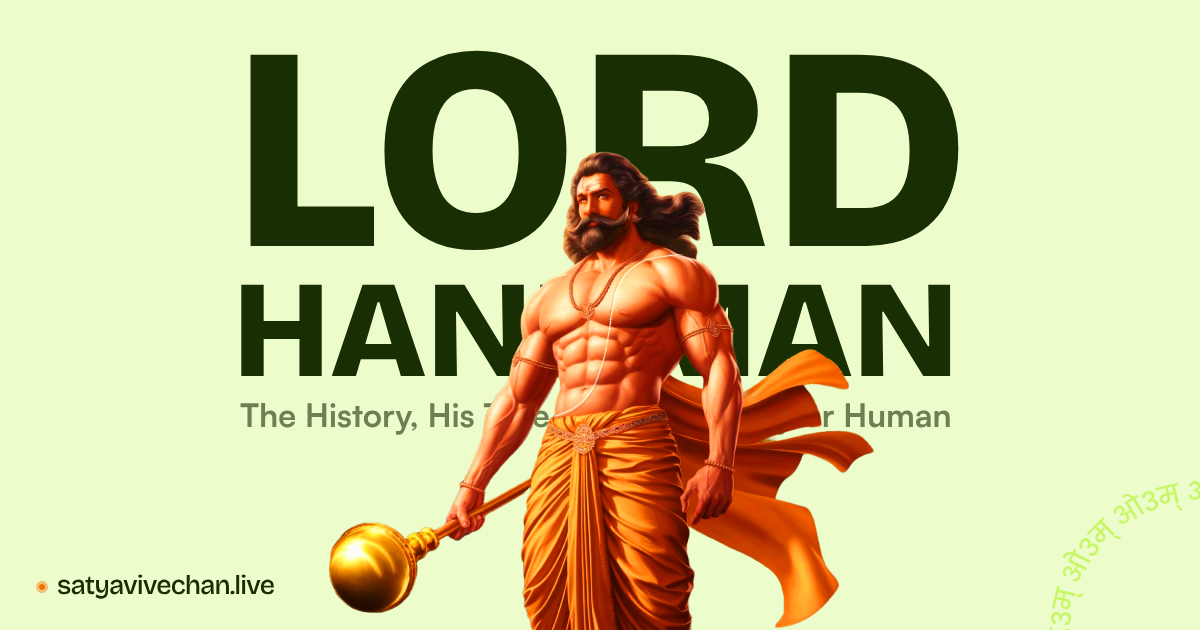
<style>
.page{position:relative;width:1200px;height:630px;background:#ecfcca}
.page>*{position:absolute;margin:0}
.t1{font:138.1px "BricolageGrotesque36pt-ExtraBold";color:#192e03}
.t2{font:289.8px "BricolageGrotesque36pt-ExtraBold";color:#192e03}
.t3{font:32.4px "Satoshi-Bold"}
.t4{font:27px "BricolageGrotesque24pt-Medium";letter-spacing:-0.03em;color:#192e03}
</style>
<div class="page">
<p class="t1" style="left:241px;top:50px;width:718px;height:328px"><span class="t2">LORD<br></span>HANUMAN</p>
<p class="t3" style="left:240px;top:403px;width:710px;height:32px">The History, His True Form—Monkey or Human</p>
<p class="t4" style="left:58px;top:574px;width:216px;height:25px">satyavivechan.live</p>
</div>
